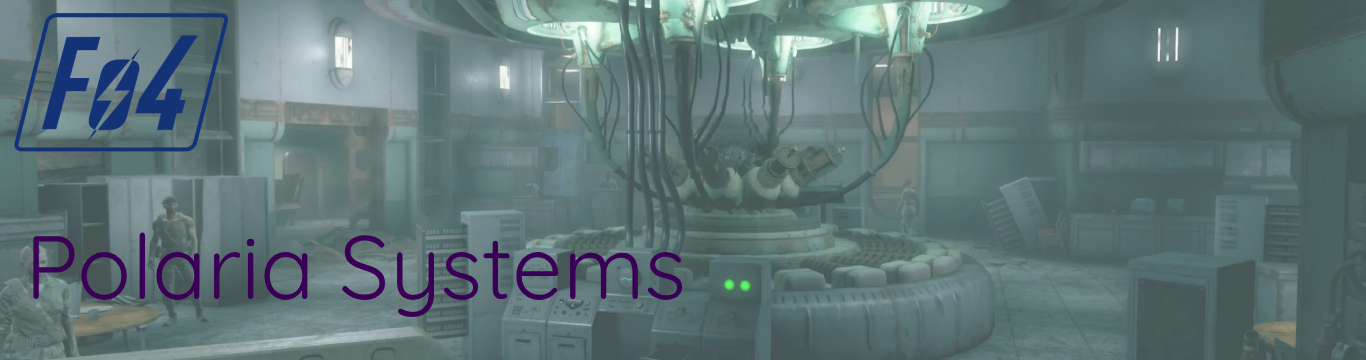
<style>
.page{position:relative;width:1366px;height:360px}
.page>*{position:absolute;margin:0}
.t1{font:89.7px "Quicksand-Regular";color:#390056}
</style>
<div class="page">
<p class="t1" style="left:33px;top:232px;width:650px;height:85px">Polaria Systems</p>
</div>
